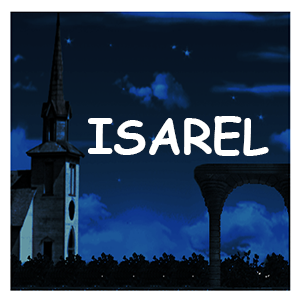
<style>
.page{position:relative;width:300px;height:300px}
.page>*{position:absolute;margin:0}
.t1{font:48px "ComicSansMS-Bold";color:#ffffff}
</style>
<div class="page">
<p class="t1" style="left:88px;top:116px;width:181px;height:40px">ISAREL</p>
</div>
